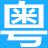
<style>
.page{position:relative;width:48px;height:48px;background:#1dadff}
.page>*{position:absolute;margin:0}
.t1{font:50px "FZLTZHK--GBK1-0";color:#fffffe}
</style>
<div class="page">
<p class="t1" style="left:0px;top:0px;width:48px;height:47px">粤</p>
</div>
